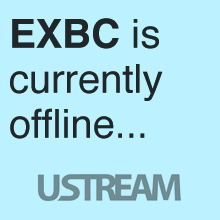
<style>
.page{position:relative;width:220px;height:220px;background:#bcf1ff}
.page>*{position:absolute;margin:0}
.t1{font:40px/45px "Helvetica";color:#202728}
.t2{font:40px/45px "Helvetica-Bold";color:#202728}
</style>
<div class="page">
<p class="t1" style="left:10px;top:18px;width:153px;height:121px"><span class="t2">EXBC</span> is <br>currently <br>offline...</p>
</div>
